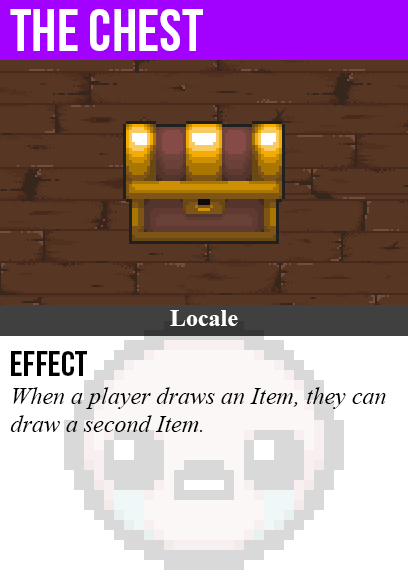
<style>
.page{position:relative;width:408px;height:585px;background:#573624}
.page>*{position:absolute;margin:0}
.t1{font:60px "BebasNeue";color:#ffffff}
.t2{font:24px "TimesNewRomanPS-BoldMT";color:#ffffff}
.t3{font:36px "BebasNeue";color:#000000}
.t4{font:24px "TimesNewRomanPS-ItalicMT";color:#000000}
</style>
<div class="page">
<p class="t1" style="left:10px;top:9px;width:193px;height:42px">the chest</p>
<p class="t2" style="left:170px;top:310px;width:68px;height:16px">Locale</p>
<p class="t3" style="left:11px;top:351px;width:76px;height:25px">Effect</p>
<p class="t4" style="left:10px;top:387px;width:376px;height:45px">When a player draws an Item, they can<br>draw a second Item.</p>
</div>
